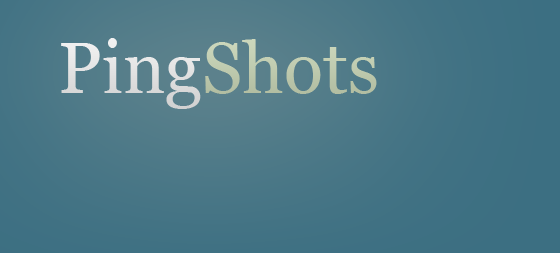
<style>
.page{position:relative;width:560px;height:253px}
.page>*{position:absolute;margin:0}
.t1{font:72px "Georgia";color:#b3c49b}
.t2{font:72px "Georgia";color:#eaeaea}
</style>
<div class="page">
<p class="t1" style="left:61px;top:38px;width:316px;height:71px"><span class="t2">Ping</span>Shots</p>
</div>
